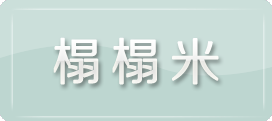
<style>
.page{position:relative;width:272px;height:121px;background:#cbdfda}
.page>*{position:absolute;margin:0}
.t1{font:50px "FZZXHJW--GB1-0";letter-spacing:0.15em;color:#fcfdfe;font-weight:bold}
</style>
<div class="page">
<p class="t1" style="left:53px;top:37px;width:166px;height:48px">榻榻米</p>
</div>
